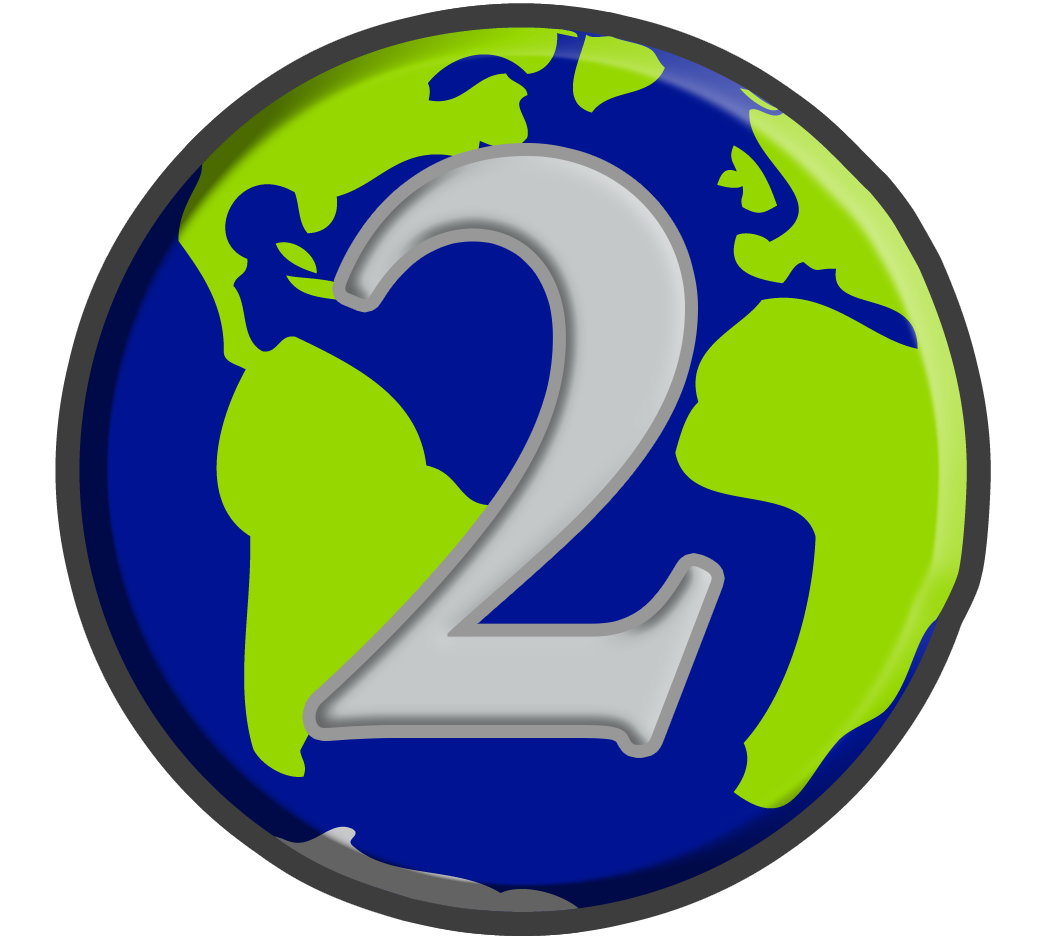
<style>
.page{position:relative;width:1046px;height:946px;background:#ffffff}
.page>*{position:absolute;margin:0}
.t1{font:833.3px "ACaslonPro-Bold";color:#b7bbbc}
</style>
<div class="page">
<p class="t1" style="left:315px;top:156px;width:397px;height:589px">2</p>
</div>
